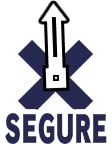
<style>
.page{position:relative;width:112px;height:150px;background:#ffffff}
.page>*{position:absolute;margin:0}
.t1{font:37.3px "RodinNTLGPro-UB";color:#272850;scale:0.61 1}
</style>
<div class="page">
<p class="t1" style="left:5px;top:113px;width:102px;height:31px">SEGURE</p>
</div>
